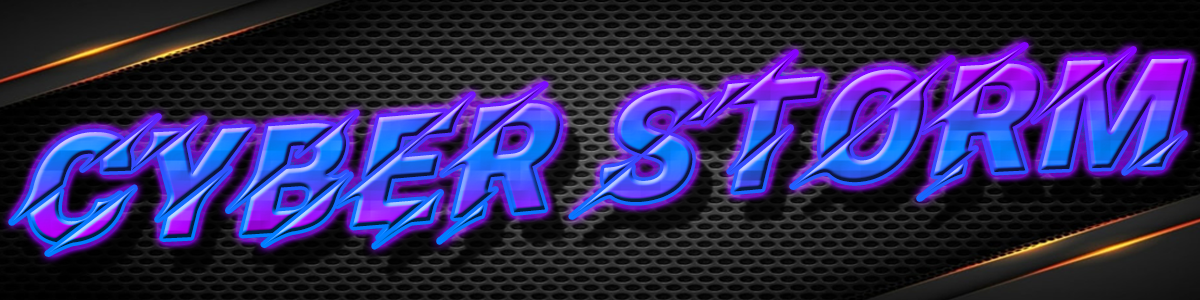
<style>
.page{position:relative;width:1200px;height:300px}
.page>*{position:absolute;margin:0}
.t1{font:150px "Facon"}
</style>
<div class="page">
<p class="t1" style="left:11px;top:45px;width:1178px;height:209px">Cyber storm</p>
</div>
